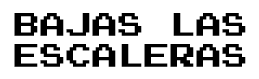
<style>
.page{position:relative;width:259px;height:79px;background:#ffffff}
.page>*{position:absolute;margin:0}
.t1{font:26px "PressStart2P";color:#000000}
</style>
<div class="page">
<p class="t1" style="left:14px;top:13px;width:232px;height:54px;text-align:center">BAJAS LAS<br>ESCALERAS</p>
</div>
